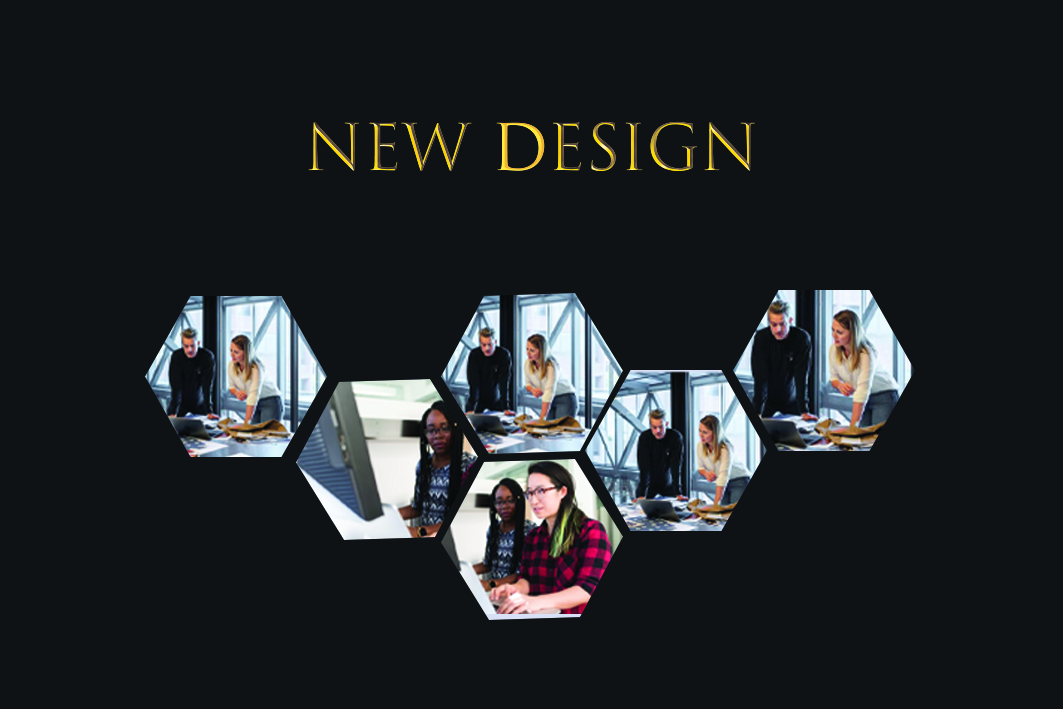
<style>
.page{position:relative;width:1063px;height:709px;background:#0f1215}
.page>*{position:absolute;margin:0}
.t1{font:62.5px "TrajanColor-Concept"}
</style>
<div class="page">
<p class="t1" style="left:308px;top:121px;width:447px;height:51px">New Design</p>
</div>
